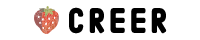
<style>
.page{position:relative;width:200px;height:40px;background:#ffffff}
.page>*{position:absolute;margin:0}
.t1{font:32.1px "fontopoFONTOPO-Regular";letter-spacing:0.1em;color:#000000}
</style>
<div class="page">
<p class="t1" style="left:69px;top:7px;width:98px;height:27px">CREER</p>
</div>
